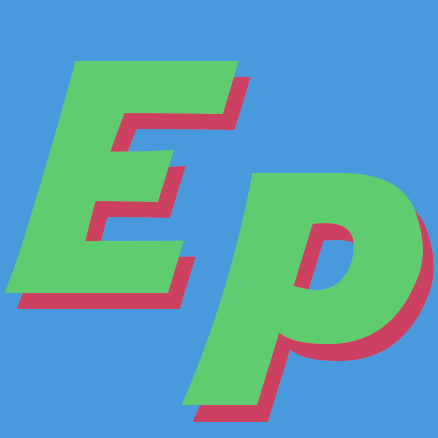
<style>
.page{position:relative;width:438px;height:438px;background:#499adc}
.page>*{position:absolute;margin:0}
.t1{font:390.6px "KoolBeans";color:#5ecc6f}
</style>
<div class="page">
<p class="t1" style="left:4px;top:61px;width:235px;height:232px">E</p>
<p class="t1" style="left:16px;top:77px;width:235px;height:232px">E</p>
<p class="t1" style="left:181px;top:173px;width:242px;height:232px">P</p>
<p class="t1" style="left:192px;top:190px;width:242px;height:232px">P</p>
</div>
